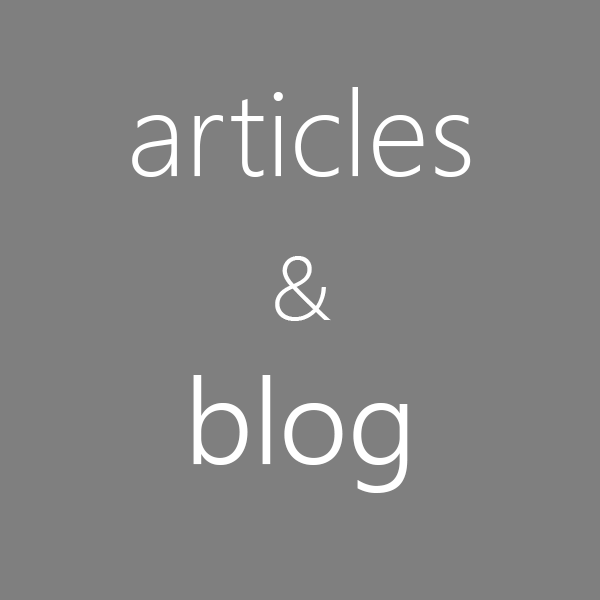
<style>
.page{position:relative;width:600px;height:600px;background:#7f7f7f}
.page>*{position:absolute;margin:0}
.t1{font:120px "SegoeUI-Light";color:#ffffff}
.t2{font:90px "SegoeUI-Light";color:#ffffff}
.t3{font:120px "SegoeUI-Semilight";color:#ffffff}
</style>
<div class="page">
<p class="t1" style="left:132px;top:87px;width:339px;height:406px;text-align:center">articles<br><span class="t2">&amp; <br></span><span class="t3">blog</span></p>
</div>
